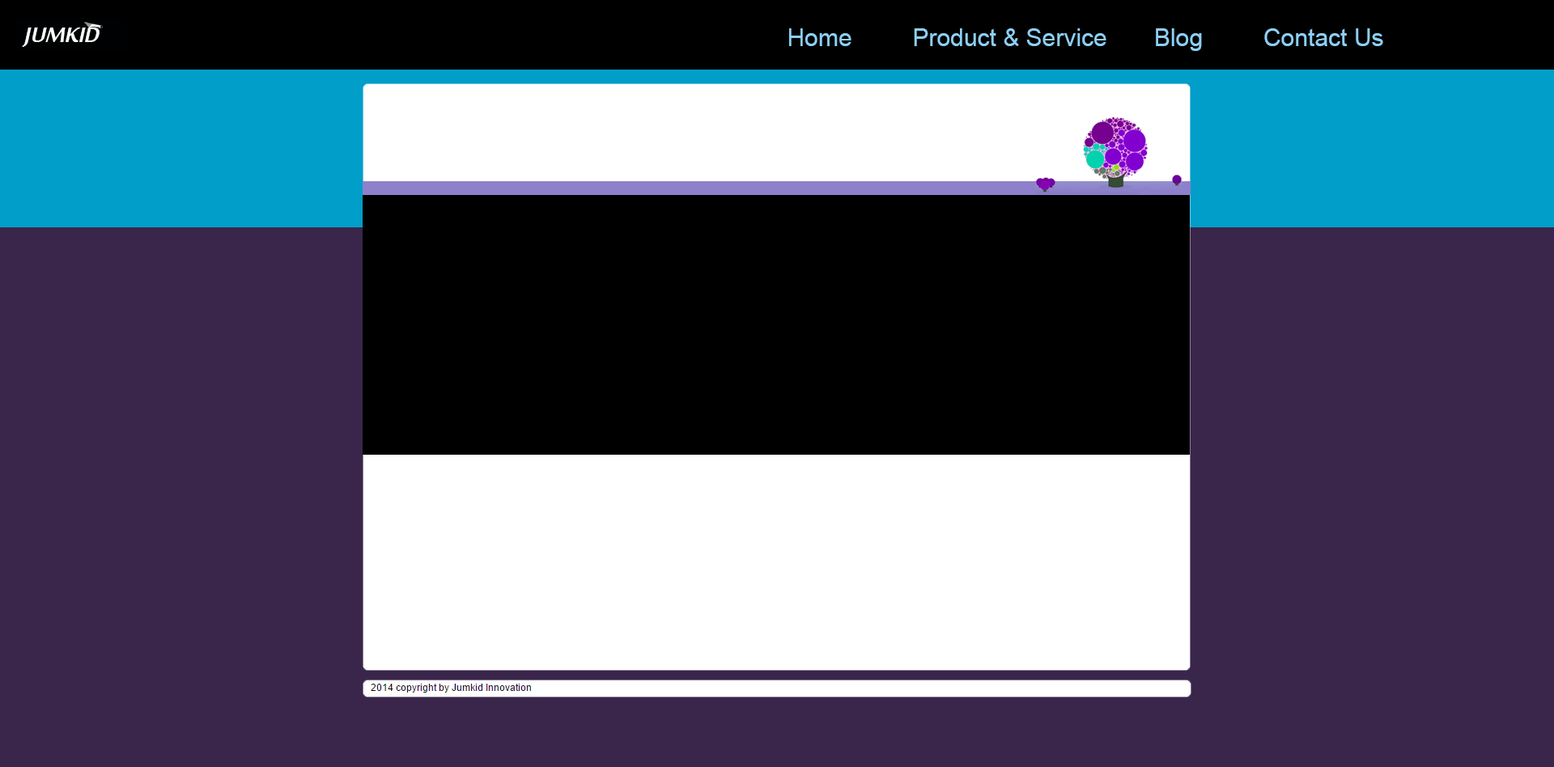
<style>
.page{position:relative;width:1554px;height:767px;background:#3a254b}
.page>*{position:absolute;margin:0}
.t1{font:24.3px "ArialMT";color:#8dcff4}
</style>
<div class="page">
<p class="t1" style="left:789px;top:28px;width:594px;height:23px">Home         Product &amp; Service       Blog         Contact Us</p>
</div>
